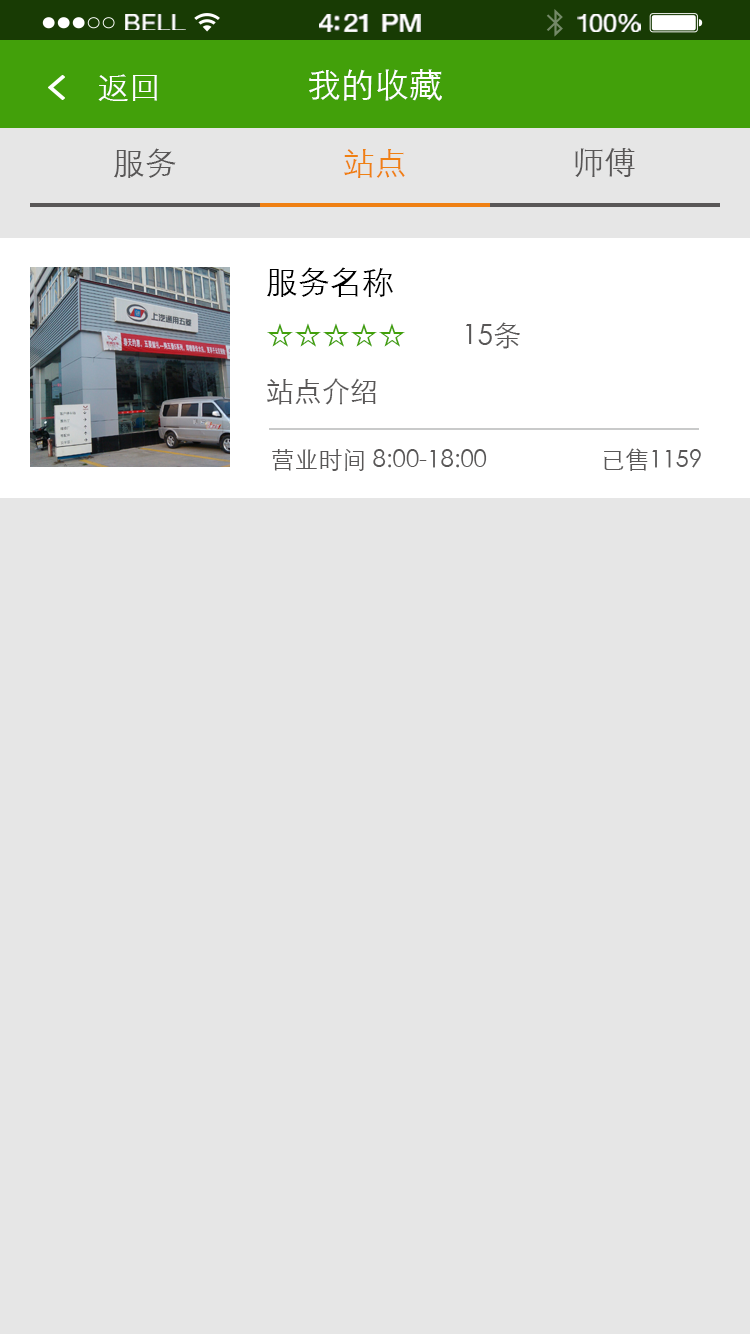
<style>
.page{position:relative;width:750px;height:1334px;background:#e6e6e6}
.page>*{position:absolute;margin:0}
.t1{font:23.3px "HelveticaNeue";letter-spacing:0.02em;color:#ffffff;scale:1.06 1}
.t2{font:25.3px "HelveticaNeue-Medium";letter-spacing:-0.02em;color:#ffffff;scale:1.06 1}
.t3{font:24.3px "HelveticaNeue";letter-spacing:-0.02em;color:#ffffff;scale:1.06 1}
.t4{font:32px "STXihei";color:#ffffff}
.t5{font:34px "STXihei";color:#ffffff}
.t6{font:32px "STXihei";color:#595757}
.t7{font:32px "STXihei";color:#ef8013}
.t8{font:28px/56px "STXihei";color:#595757}
.t9{font:32px/56px "STXihei";color:#000000}
.t10{font:28px/56px "STXihei";color:#42a00a}
.t11{font:24px "STXihei";color:#595757}
</style>
<div class="page">
<p class="t1" style="left:125px;top:14px;width:61px;height:16px">BELL</p>
<p class="t2" style="left:319px;top:14px;width:102px;height:18px">4:21 PM</p>
<p class="t3" style="left:577px;top:14px;width:64px;height:18px">100%</p>
<p class="t4" style="left:98px;top:74px;width:59px;height:27px">返回</p>
<p class="t5" style="left:309px;top:69px;width:133px;height:32px">我的收藏</p>
<p class="t6" style="left:114px;top:148px;width:62px;height:30px">服务</p>
<p class="t7" style="left:344px;top:149px;width:61px;height:29px">站点</p>
<p class="t6" style="left:575px;top:148px;width:60px;height:29px">师傅</p>
<p class="t8" style="left:267px;top:267px;width:253px;height:138px"><span class="t9">服务名称<br></span><span class="t10">☆☆☆☆☆</span>        15条<br>站点介绍</p>
<p class="t11" style="left:272px;top:448px;width:429px;height:23px">营业时间 8:00-18:00                   已售1159</p>
</div>
